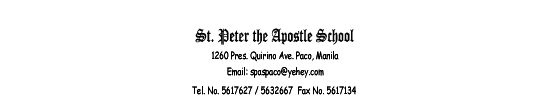
<style>
.page{position:relative;width:534px;height:105px;background:#ffffff}
.page>*{position:absolute;margin:0}
.t1{font:18px "OldEnglishTextMT";color:#000000;scale:0.75 1}
.t2{font:10px "ComicSansMS";color:#000000;scale:0.75 1}
</style>
<div class="page">
<p class="t1" style="left:195px;top:28px;width:159px;height:17px">St. Peter the Apostle School</p>
<p class="t2" style="left:212px;top:51px;width:127px;height:11px">1260 Pres. Quirino Ave. Paco, Manila</p>
<p class="t2" style="left:227px;top:67px;width:97px;height:11px">Email: spaspaco@yehey.com</p>
<p class="t2" style="left:192px;top:86px;width:164px;height:9px">Tel. No. 5617627 / 5632667  Fax No. 5617134</p>
</div>
